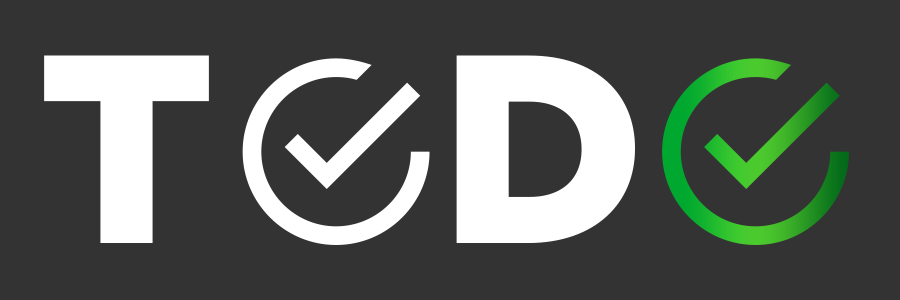
<style>
.page{position:relative;width:900px;height:300px;background:#333333}
.page>*{position:absolute;margin:0}
.t1{font:267.8px "Gotham-Black";color:#ffffff}
</style>
<div class="page">
<p class="t1" style="left:44px;top:55px;width:165px;height:188px">T</p>
<p class="t1" style="left:456px;top:55px;width:179px;height:188px">D</p>
</div>
